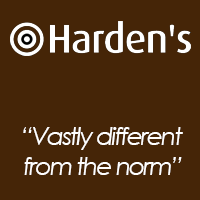
<style>
.page{position:relative;width:200px;height:200px;background:#452507}
.page>*{position:absolute;margin:0}
.t1{font:25px "CenturyGothic-Italic";letter-spacing:-0.075em;color:#ffffff}
</style>
<div class="page">
<p class="t1" style="left:23px;top:127px;width:160px;height:48px;text-align:right">“Vastly different<br>from the norm”</p>
</div>
